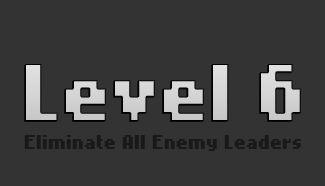
<style>
.page{position:relative;width:325px;height:186px;background:#333333}
.page>*{position:absolute;margin:0}
.t1{font:65px "NokiaCellphoneFC-Small";color:#d1d1d1}
.t2{font:16px "NokiaCellphoneFC-Small";color:#191919}
</style>
<div class="page">
<p class="t1" style="left:25px;top:64px;width:276px;height:57px">Level 6</p>
<p class="t2" style="left:24px;top:135px;width:277px;height:16px">Eliminate All Enemy Leaders</p>
</div>
